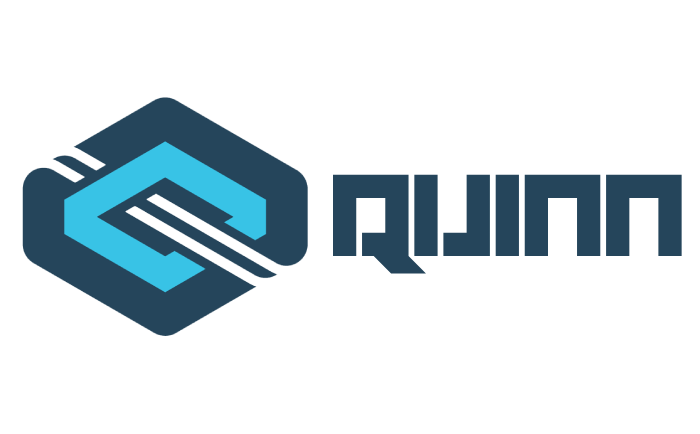
<style>
.page{position:relative;width:700px;height:434px;background:#ffffff}
.page>*{position:absolute;margin:0}
.t1{font:119px "LucidStreamsLaminar";color:#25455b}
</style>
<div class="page">
<p class="t1" style="left:333px;top:174px;width:349px;height:100px">QUINN</p>
</div>
